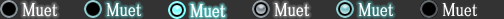
<style>
.page{position:relative;width:504px;height:19px;background:#333333}
.page>*{position:absolute;margin:0}
.t1{font:19px "MS-PMincho";color:#ffffff;font-weight:bold;scale:0.84 1}
</style>
<div class="page">
<p class="t1" style="left:22px;top:3px;width:35px;height:14px">Muet</p>
<p class="t1" style="left:106px;top:3px;width:35px;height:14px">Muet</p>
<p class="t1" style="left:190px;top:4px;width:35px;height:14px">Muet</p>
<p class="t1" style="left:274px;top:3px;width:35px;height:14px">Muet</p>
<p class="t1" style="left:358px;top:3px;width:35px;height:14px">Muet</p>
<p class="t1" style="left:442px;top:3px;width:35px;height:14px">Muet</p>
</div>
